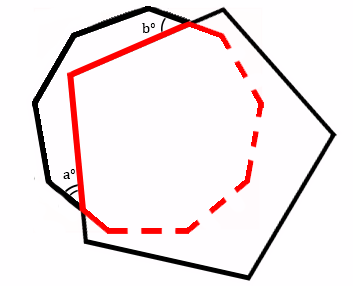
<style>
.page{position:relative;width:353px;height:286px;background:#fffdff}
.page>*{position:absolute;margin:0}
.t1{font:15px "CambriaMath";letter-spacing:0.02em;color:#000000}
</style>
<div class="page">
<p class="t1" style="left:142px;top:23px;width:13px;height:10px">bo</p>
<p class="t1" style="left:63px;top:169px;width:12px;height:10px">ao</p>
</div>
